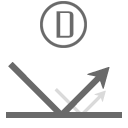
<style>
.page{position:relative;width:128px;height:128px;background:#ffffff}
.page>*{position:absolute;margin:0}
.t1{font:30px "TVpl";letter-spacing:0.05em;color:#6a6a6a}
</style>
<div class="page">
<p class="t1" style="left:56px;top:11px;width:18px;height:27px">D</p>
</div>
